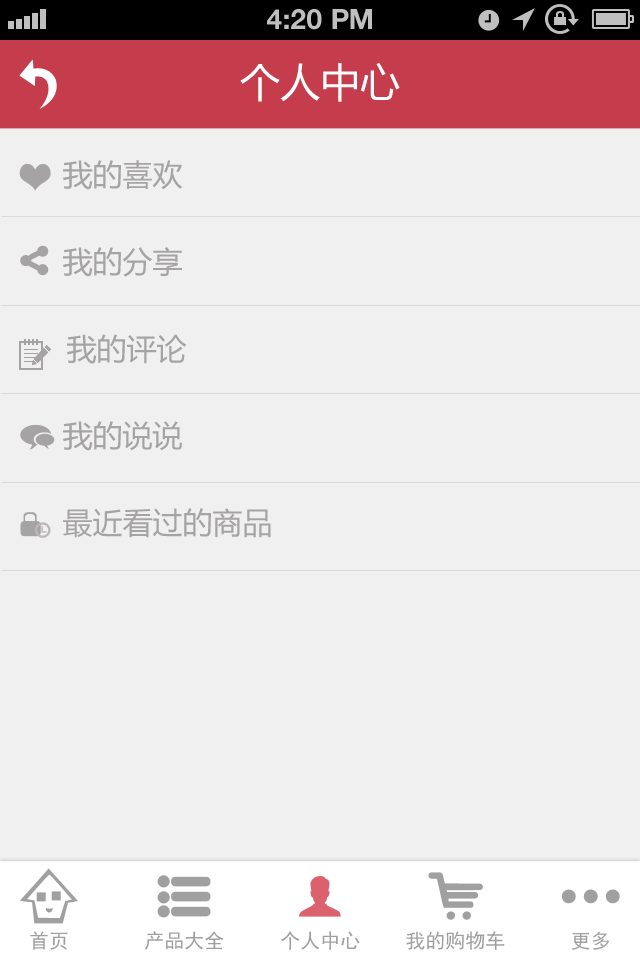
<style>
.page{position:relative;width:640px;height:960px;background:#f0f0f0}
.page>*{position:absolute;margin:0}
.t1{font:28px "HelveticaNeue-Bold";color:#bfbfbf;text-transform:uppercase}
.t2{font:40px "MicrosoftYaHei";color:#ffffff;text-transform:uppercase}
.t3{font:30px "MicrosoftYaHei";color:#a5a3a3;text-transform:uppercase}
.t4{font:20px "SimHei";color:#a0a0a0}
</style>
<div class="page">
<p class="t1" style="left:267px;top:9px;width:105px;height:21px">4:20 PM</p>
<p class="t2" style="left:240px;top:62px;width:160px;height:40px">个人中心</p>
<p class="t3" style="left:63px;top:160px;width:120px;height:30px">我的喜欢</p>
<p class="t3" style="left:63px;top:247px;width:119px;height:30px">我的分享</p>
<p class="t3" style="left:67px;top:334px;width:120px;height:30px">我的评论</p>
<p class="t3" style="left:63px;top:421px;width:119px;height:30px">我的说说</p>
<p class="t3" style="left:63px;top:508px;width:208px;height:30px">最近看过的商品</p>
<p class="t4" style="left:30px;top:931px;width:38px;height:19px">首页</p>
<p class="t4" style="left:145px;top:931px;width:79px;height:19px">产品大全</p>
<p class="t4" style="left:281px;top:931px;width:79px;height:19px">个人中心</p>
<p class="t4" style="left:406px;top:931px;width:99px;height:19px">我的购物车</p>
<p class="t4" style="left:572px;top:931px;width:38px;height:19px">更多</p>
</div>
